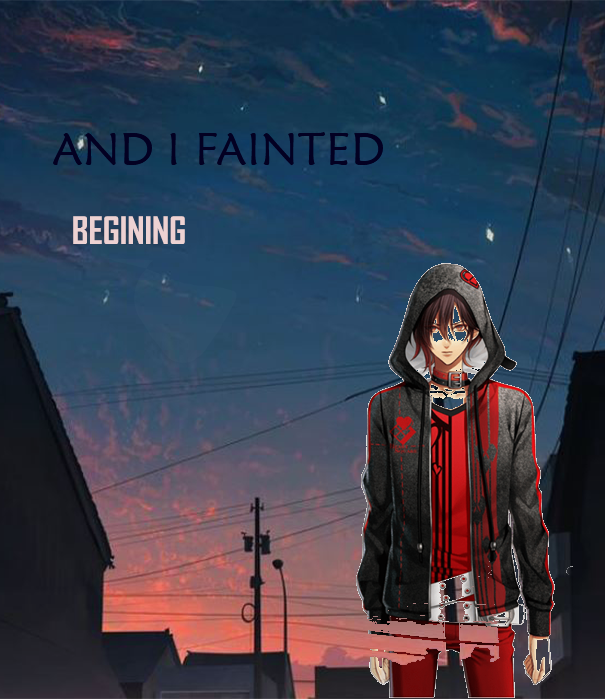
<style>
.page{position:relative;width:605px;height:699px}
.page>*{position:absolute;margin:0}
.t1{font:46.1px "MaiandraGD-Regular";color:#030025}
.t2{font:36px "AgencyFB-Bold";color:#edd2d2}
</style>
<div class="page">
<p class="t1" style="left:53px;top:132px;width:330px;height:34px">AND I FAINTED</p>
<p class="t2" style="left:73px;top:216px;width:112px;height:28px">BEGINING</p>
</div>
